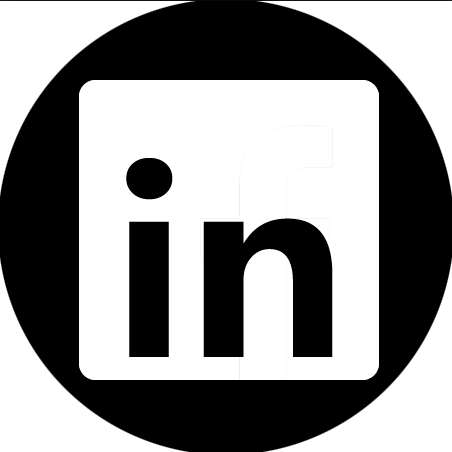
<style>
.page{position:relative;width:452px;height:452px;background:#ffffff}
.page>*{position:absolute;margin:0}
.t1{font:250px "MicrosoftYaHei-Bold";color:#000000}
</style>
<div class="page">
<p class="t1" style="left:126px;top:157px;width:207px;height:199px">in</p>
</div>
